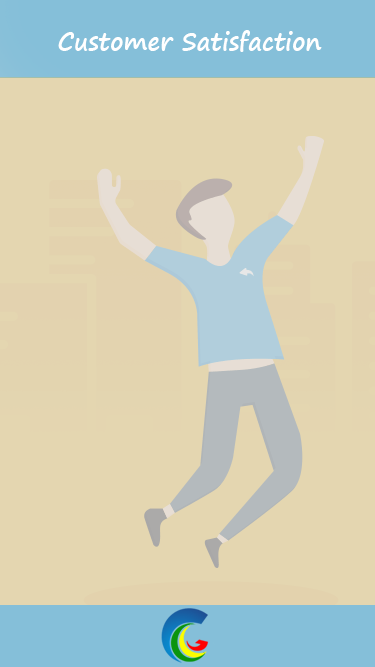
<style>
.page{position:relative;width:375px;height:667px;background:#e4d6b0}
.page>*{position:absolute;margin:0}
.t1{font:24px "SegoePrint-Bold";color:#ffffff}
</style>
<div class="page">
<p class="t1" style="left:58px;top:30px;width:264px;height:22px">Customer Satisfaction</p>
</div>
